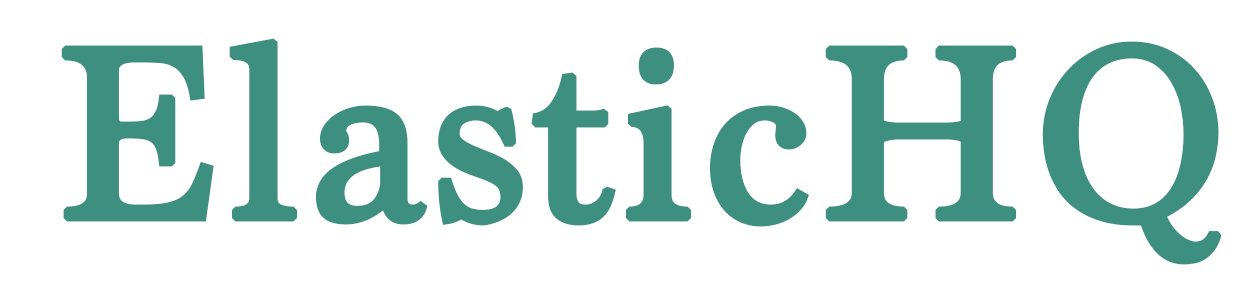
<style>
.page{position:relative;width:1249px;height:284px;background:#ffffff}
.page>*{position:absolute;margin:0}
.t1{font:255px "Marion-Regular";letter-spacing:0.01em;color:#3d8f7f;font-weight:bold}
</style>
<div class="page">
<p class="t1" style="left:61px;top:38px;width:1161px;height:227px">ElasticHQ</p>
</div>
